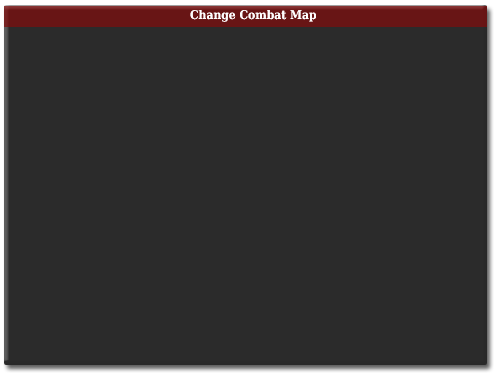
<style>
.page{position:relative;width:497px;height:374px;background:#2b2b2b}
.page>*{position:absolute;margin:0}
.t1{font:12px "DejaVuSerifCondensed-Bold";color:#fdfdfd}
</style>
<div class="page">
<p class="t1" style="left:190px;top:10px;width:126px;height:12px">Change Combat Map</p>
</div>
